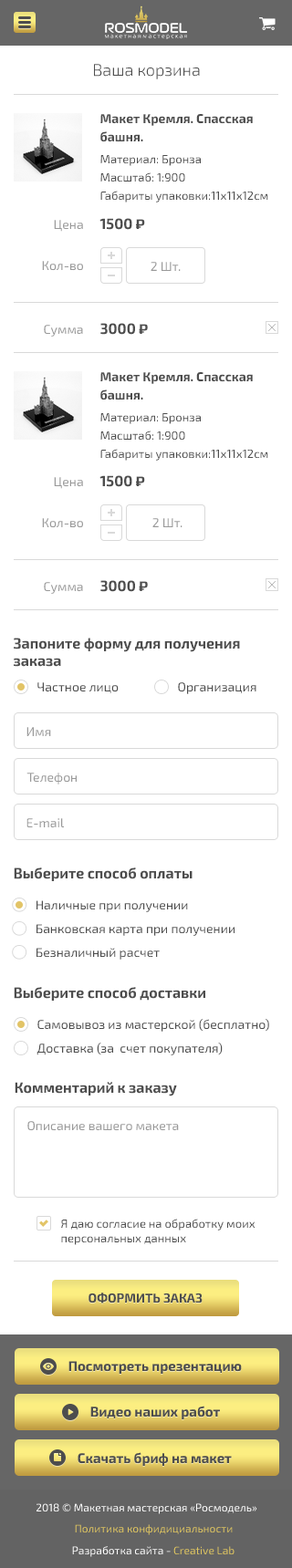
<style>
.page{position:relative;width:292px;height:1568px;background:#ffffff}
.page>*{position:absolute;margin:0}
.t1{font:16.4px "Exo2-Light";color:#4d4d4d}
.t2{font:12.8px/18.2px "Exo2-Bold";color:#4d4d4d}
.t3{font:11.9px/18.2px "Exo2-Regular";color:#4d4d4d}
.t4{font:12.8px "Exo2-Regular";color:#999999}
.t5{font:14.6px "Exo2-Bold";color:#4d4d4d}
.t6{font:14.6px "Play-Bold";color:#4d4d4d}
.t7{font:12.8px "Exo2-Regular";color:#4d4d4d}
.t8{font:12.5px "Exo2-Regular";color:#4d4d4d}
.t9{font:11.9px/14.6px "Exo2-Regular";color:#4d4d4d}
.t10{font:12.8px "Exo2-Bold";color:#4d4d4d;text-transform:uppercase}
</style>
<div class="page">
<p class="t1" style="left:94px;top:64px;width:106px;height:15px">Ваша корзина</p>
<p class="t2" style="left:100px;top:114px;width:153px;height:28px">Макет Кремля. Спасская <br>башня.</p>
<p class="t3" style="left:100px;top:155px;width:168px;height:47px">Материал: Бронза<br>Масштаб: 1:900<br>Габариты упаковки:11х11х12см</p>
<p class="t4" style="left:54px;top:220px;width:29px;height:12px">Цена</p>
<p class="t5" style="left:99px;top:218px;width:46px;height:12px">1500 <span class="t6">₽</span></p>
<p class="t4" style="left:42px;top:261px;width:41px;height:10px">Кол-во</p>
<p class="t4" style="left:151px;top:262px;width:30px;height:9px">2 Шт.</p>
<p class="t4" style="left:44px;top:325px;width:39px;height:12px">Сумма</p>
<p class="t5" style="left:100px;top:323px;width:48px;height:12px">3000 <span class="t6">₽</span></p>
<p class="t2" style="left:100px;top:372px;width:153px;height:28px">Макет Кремля. Спасская <br>башня.</p>
<p class="t3" style="left:100px;top:413px;width:168px;height:48px">Материал: Бронза<br>Масштаб: 1:900<br>Габариты упаковки:11х11х12см</p>
<p class="t4" style="left:54px;top:477px;width:29px;height:12px">Цена</p>
<p class="t5" style="left:99px;top:475px;width:46px;height:12px">1500 <span class="t6">₽</span></p>
<p class="t4" style="left:42px;top:518px;width:41px;height:10px">Кол-во</p>
<p class="t4" style="left:152px;top:518px;width:30px;height:9px">2 Шт.</p>
<p class="t4" style="left:44px;top:582px;width:39px;height:12px">Сумма</p>
<p class="t5" style="left:100px;top:580px;width:48px;height:12px">3000 <span class="t6">₽</span></p>
<p class="t5" style="left:14px;top:638px;width:226px;height:29px">Запоните форму для получения <br>заказа</p>
<p class="t7" style="left:37px;top:682px;width:82px;height:11px">Частное лицо</p>
<p class="t7" style="left:178px;top:682px;width:78px;height:12px">Организация</p>
<p class="t4" style="left:26px;top:727px;width:25px;height:9px">Имя</p>
<p class="t4" style="left:26px;top:773px;width:51px;height:11px">Телефон</p>
<p class="t4" style="left:26px;top:818px;width:38px;height:10px">E-mail</p>
<p class="t5" style="left:14px;top:867px;width:178px;height:14px">Выберите способ оплаты</p>
<p class="t8" style="left:36px;top:900px;width:152px;height:12px">Наличные при получении</p>
<p class="t8" style="left:36px;top:924px;width:198px;height:12px">Банковская карта при получении</p>
<p class="t8" style="left:36px;top:948px;width:124px;height:12px">Безналичный расчет</p>
<p class="t5" style="left:14px;top:987px;width:191px;height:14px">Выберите способ доставки</p>
<p class="t7" style="left:37px;top:1019px;width:232px;height:13px">Самовывоз из мастерской (бесплатно)</p>
<p class="t7" style="left:36px;top:1043px;width:187px;height:12px">Доставка (за  счет покупателя)</p>
<p class="t5" style="left:15px;top:1082px;width:162px;height:14px">Комментарий к заказу</p>
<p class="t4" style="left:27px;top:1121px;width:152px;height:10px">Описание вашего макета</p>
<p class="t9" style="left:61px;top:1219px;width:194px;height:26px">Я даю согласие на обработку моих <br>персональных данных</p>
<p class="t10" style="left:88px;top:1293px;width:114px;height:10px">Оформить заказ</p>
</div>
